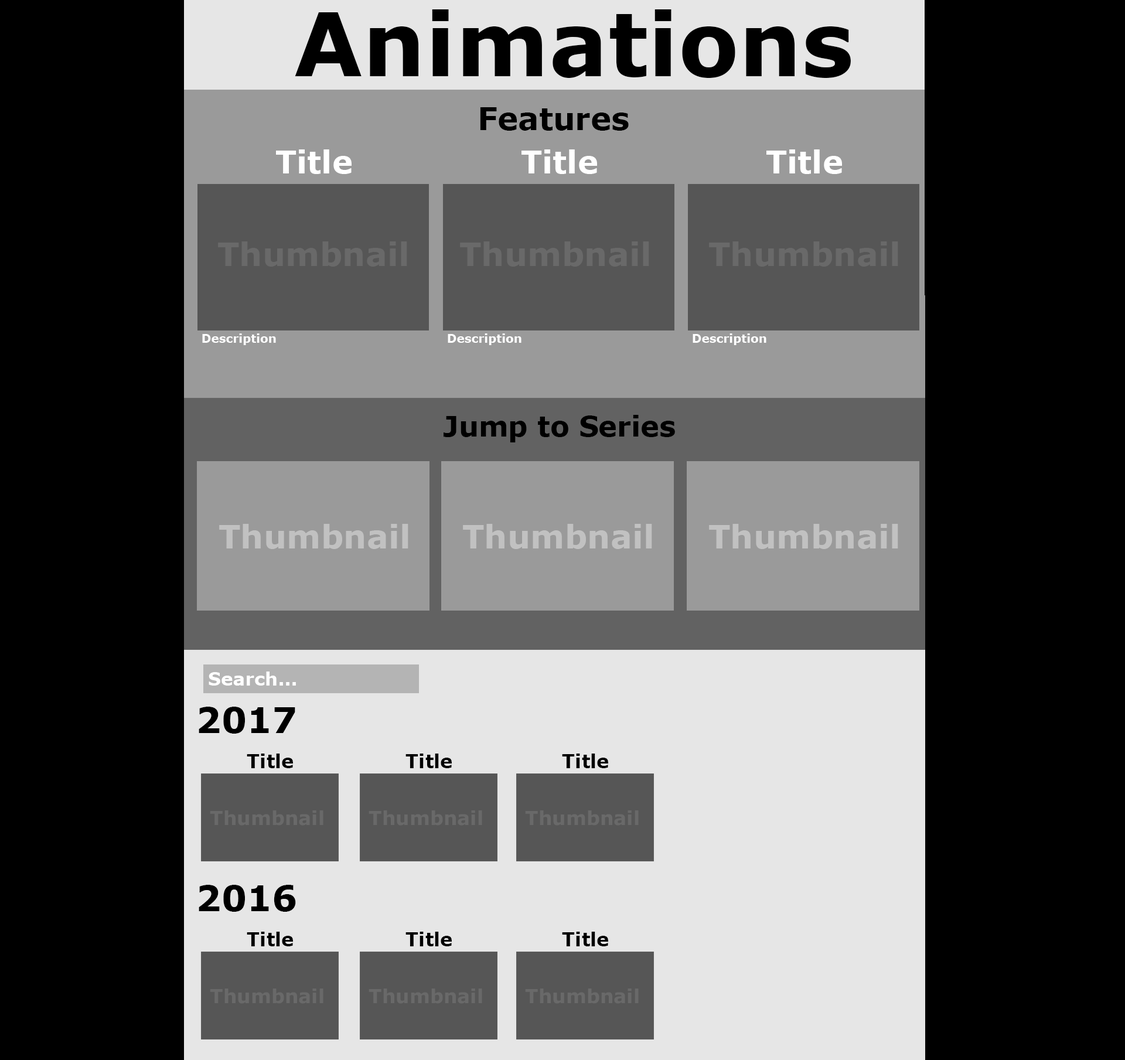
<style>
.page{position:relative;width:1125px;height:1060px;background:#000000}
.page>*{position:absolute;margin:0}
.t1{font:88.2px "Verdana-Bold";color:#000000}
.t2{font:31px "Verdana-Bold";color:#000000}
.t3{font:31.1px "Verdana-Bold";color:#ffffff}
.t4{font:32.4px "Verdana-Bold";color:#6a6a6a}
.t5{font:11.7px "Verdana-Bold";color:#ffffff}
.t6{font:27.9px "Verdana-Bold";color:#000000}
.t7{font:32.4px "Verdana-Bold";color:#c1c1c1}
.t8{font:18.2px "Verdana-Bold";color:#ffffff}
.t9{font:35.8px "Verdana-Bold";color:#000000}
.t10{font:19px "Verdana-Bold";color:#000000}
</style>
<div class="page">
<p class="t1" style="left:295px;top:9px;width:556px;height:69px">Animations</p>
<p class="t2" style="left:480px;top:107px;width:149px;height:24px">Features</p>
<p class="t3" style="left:276px;top:149px;width:76px;height:25px">Title</p>
<p class="t3" style="left:521px;top:149px;width:76px;height:25px">Title</p>
<p class="t3" style="left:766px;top:149px;width:76px;height:25px">Title</p>
<p class="t4" style="left:218px;top:241px;width:189px;height:26px">Thumbnail</p>
<p class="t4" style="left:460px;top:241px;width:189px;height:26px">Thumbnail</p>
<p class="t4" style="left:709px;top:241px;width:189px;height:26px">Thumbnail</p>
<p class="t5" style="left:202px;top:333px;width:74px;height:12px">Description</p>
<p class="t5" style="left:448px;top:333px;width:73px;height:12px">Description</p>
<p class="t5" style="left:693px;top:333px;width:73px;height:12px">Description</p>
<p class="t6" style="left:444px;top:415px;width:231px;height:27px">Jump to Series</p>
<p class="t7" style="left:219px;top:524px;width:189px;height:25px">Thumbnail</p>
<p class="t7" style="left:463px;top:524px;width:189px;height:25px">Thumbnail</p>
<p class="t7" style="left:709px;top:524px;width:189px;height:25px">Thumbnail</p>
<p class="t8" style="left:209px;top:671px;width:87px;height:15px">Search...</p>
<p class="t9" style="left:199px;top:707px;width:96px;height:27px">2017</p>
<p class="t10" style="left:247px;top:754px;width:46px;height:14px">Title</p>
<p class="t10" style="left:405px;top:754px;width:47px;height:14px">Title</p>
<p class="t10" style="left:562px;top:754px;width:46px;height:14px">Title</p>
<p class="t9" style="left:199px;top:885px;width:97px;height:27px">2016</p>
<p class="t10" style="left:247px;top:932px;width:46px;height:14px">Title</p>
<p class="t10" style="left:405px;top:932px;width:47px;height:14px">Title</p>
<p class="t10" style="left:562px;top:932px;width:46px;height:14px">Title</p>
</div>
